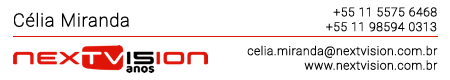
<style>
.page{position:relative;width:450px;height:80px;background:#ffffff}
.page>*{position:absolute;margin:0}
.t1{font:18px "Heebo-Thin";letter-spacing:0.025em;color:#000000;font-weight:bold}
.t2{font:12px "Heebo-Thin";letter-spacing:0.025em;color:#000000;font-weight:bold}
</style>
<div class="page">
<p class="t1" style="left:14px;top:12px;width:115px;height:15px">Célia Miranda</p>
<p class="t2" style="left:333px;top:7px;width:104px;height:10px">+55 11 5575 6468</p>
<p class="t2" style="left:326px;top:22px;width:111px;height:10px">+55 11 98594 0313</p>
<p class="t2" style="left:247px;top:45px;width:191px;height:13px">celia.miranda@nextvision.com.br</p>
<p class="t2" style="left:304px;top:60px;width:134px;height:10px">www.nextvision.com.br</p>
</div>
